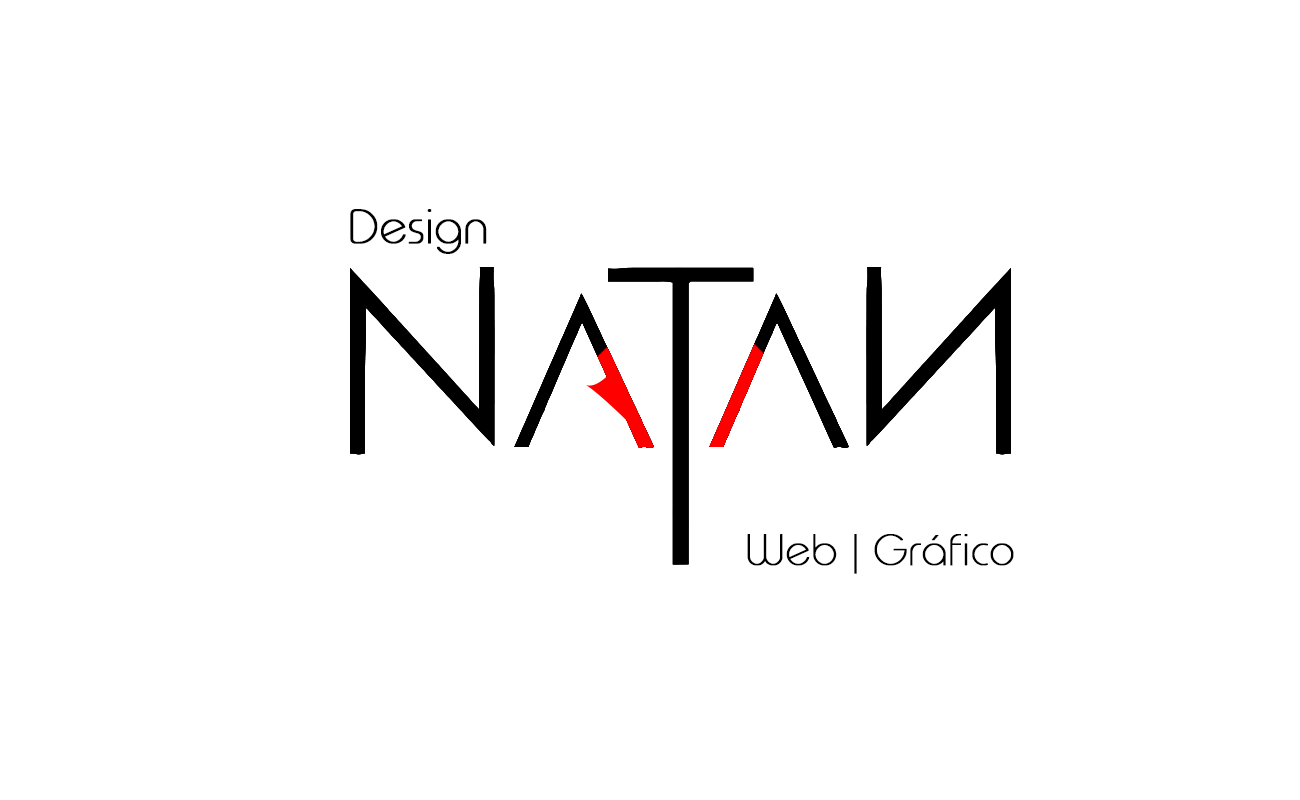
<style>
.page{position:relative;width:1300px;height:800px;background:#ffffff}
.page>*{position:absolute;margin:0}
.t1{font:48px "TypoRoundThinDemo";color:#000000;font-weight:bold}
.t2{font:43.9px "TypoRoundThinDemo";color:#000000;font-weight:bold}
</style>
<div class="page">
<p class="t1" style="left:350px;top:209px;width:137px;height:45px">Design</p>
<p class="t2" style="left:747px;top:534px;width:267px;height:40px">Web | Gráfico</p>
</div>
